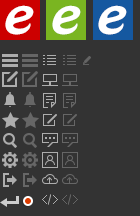
<style>
.page{position:relative;width:140px;height:216px;background:#333333}
.page>*{position:absolute;margin:0}
.t1{font:43.2px "HoboStd";color:#ffffff;font-style:italic;scale:1.25 1}
</style>
<div class="page">
<p class="t1" style="left:5px;top:5px;width:29px;height:30px">e</p>
<p class="t1" style="left:52px;top:5px;width:29px;height:30px">e</p>
<p class="t1" style="left:98px;top:5px;width:29px;height:30px">e</p>
</div>
